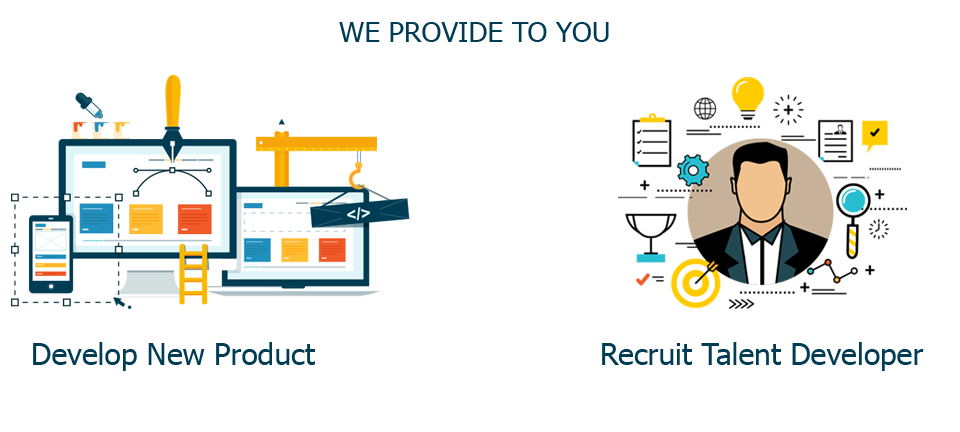
<style>
.page{position:relative;width:960px;height:432px;background:#ffffff}
.page>*{position:absolute;margin:0}
.t1{font:28px "Tahoma";color:#003c53}
.t2{font:30px "Tahoma";color:#003c53}
</style>
<div class="page">
<p class="t1" style="left:339px;top:22px;width:270px;height:20px">WE PROVIDE TO YOU</p>
<p class="t2" style="left:33px;top:342px;width:282px;height:29px">Develop New Product</p>
<p class="t2" style="left:602px;top:342px;width:322px;height:29px">Recruit Talent Developer</p>
</div>
